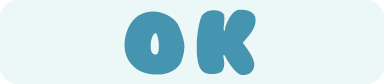
<style>
.page{position:relative;width:384px;height:84px;background:#ecf7f7}
.page>*{position:absolute;margin:0}
.t1{font:80.6px "BubbleGum";letter-spacing:0.04em;color:#4695b0;font-weight:bold;scale:1.26 1}
</style>
<div class="page">
<p class="t1" style="left:124px;top:9px;width:132px;height:67px">OK</p>
</div>
